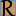
<style>
.page{position:relative;width:16px;height:16px;background:#c99854}
.page>*{position:absolute;margin:0}
.t1{font:27.7px "Gabriola";color:#000000;text-transform:uppercase;scale:1.05 1}
</style>
<div class="page">
<p class="t1" style="left:0px;top:0px;width:15px;height:17px">r</p>
</div>
